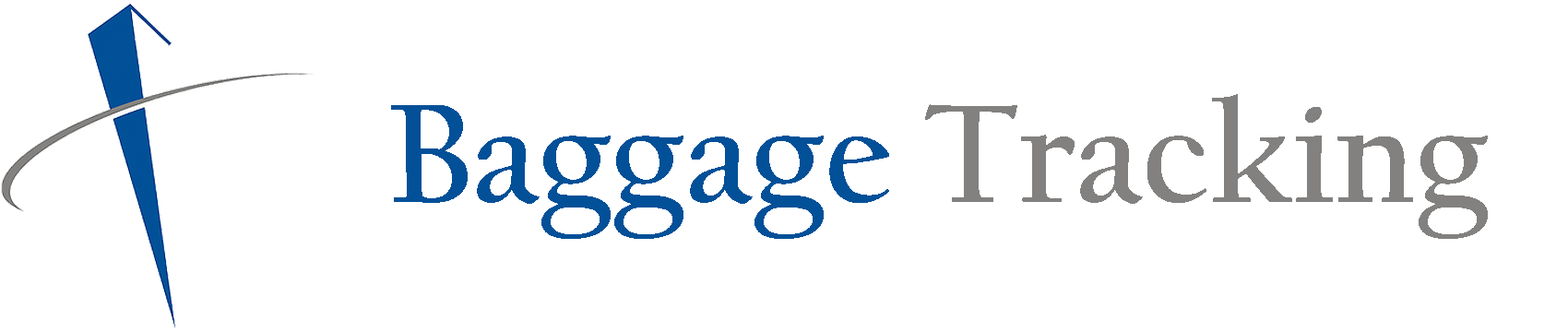
<style>
.page{position:relative;width:1568px;height:332px;background:#ffffff}
.page>*{position:absolute;margin:0}
.t1{font:146px "CalifornianFB-Bold";color:#828180}
.t2{font:146px "CalifornianFB-Bold";color:#015098}
</style>
<div class="page">
<p class="t1" style="left:391px;top:94px;width:1097px;height:145px"><span class="t2">Baggage </span>Tracking</p>
</div>
